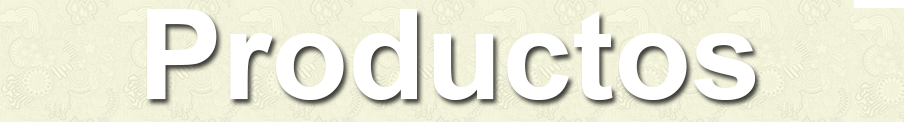
<style>
.page{position:relative;width:904px;height:122px;background:#ffffff}
.page>*{position:absolute;margin:0}
.t1{font:126.1px "Arial-BoldMT";color:#ffffff}
</style>
<div class="page">
<p class="t1" style="left:147px;top:9px;width:609px;height:91px">Productos</p>
</div>
